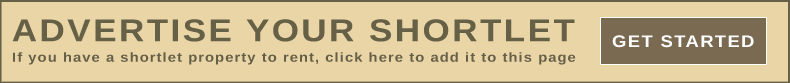
<style>
.page{position:relative;width:790px;height:83px;background:#ead5a7}
.page>*{position:absolute;margin:0}
.t1{font:31.4px "Arimo-Bold";letter-spacing:0.07em;color:#666047;scale:1.11 1}
.t2{font:16.7px "Arimo-Bold";letter-spacing:0.07em;color:#fefeff;scale:1.11 1}
.t3{font:13.3px "Arimo-Bold";letter-spacing:0.07em;color:#665f48;scale:1.11 1}
</style>
<div class="page">
<p class="t1" style="left:12px;top:19px;width:563px;height:23px">ADVERTISE YOUR SHORTLET</p>
<p class="t2" style="left:612px;top:35px;width:142px;height:13px">GET STARTED</p>
<p class="t3" style="left:13px;top:52px;width:563px;height:13px">If you have a shortlet property to rent, click here to add it to this page</p>
</div>
